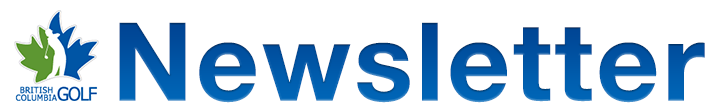
<style>
.page{position:relative;width:728px;height:111px;background:#ffffff}
.page>*{position:absolute;margin:0}
.t1{font:109.1px "HelveticaNeue-Bold";letter-spacing:0.029em;color:#0055a5}
</style>
<div class="page">
<p class="t1" style="left:119px;top:22px;width:586px;height:81px">Newsletter</p>
</div>
